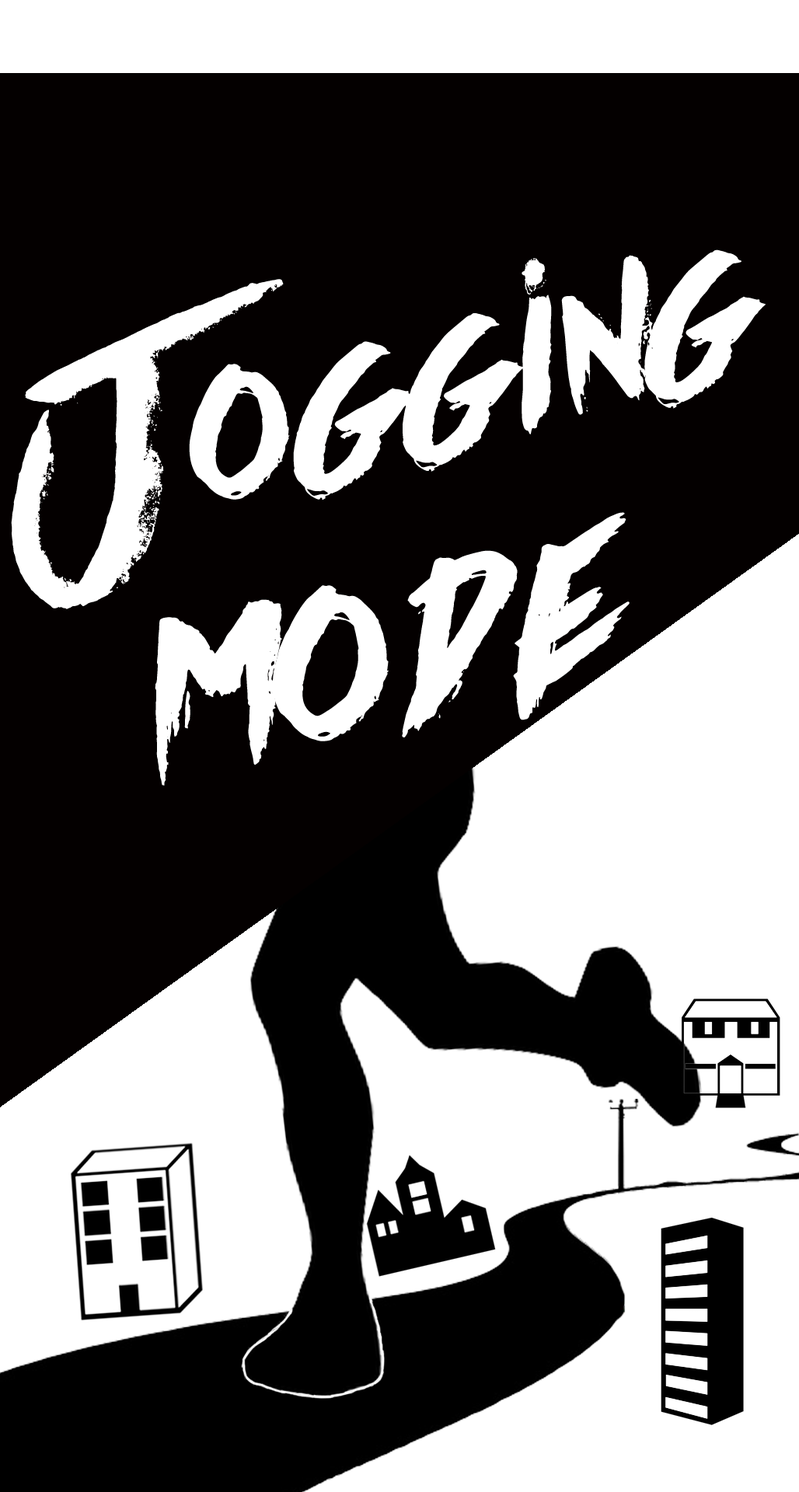
<style>
.page{position:relative;width:799px;height:1492px;background:#040000}
.page>*{position:absolute;margin:0}
.t1{font:270.1px "Againts";color:#ffffff}
.t2{font:310.9px "Againts";color:#ffffff}
</style>
<div class="page">
<p class="t1" style="left:11px;top:250px;width:755px;height:359px;rotate:-15deg">Jogging</p>
<p class="t2" style="left:155px;top:512px;width:475px;height:274px;rotate:-12deg">mode</p>
</div>
